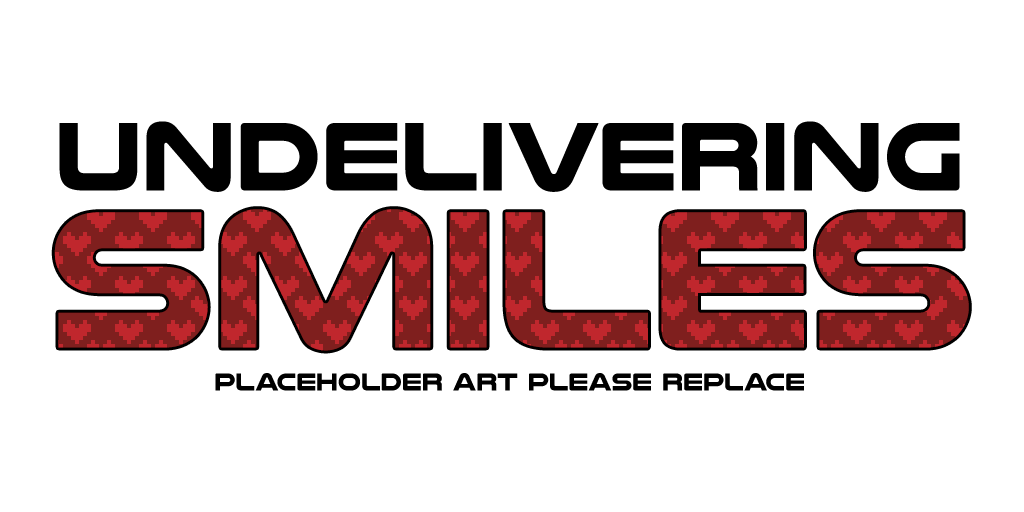
<style>
.page{position:relative;width:1024px;height:512px;background:#ffffff}
.page>*{position:absolute;margin:0}
.t1{font:100px "NulshockRg-Bold";color:#000000}
.t2{font:200px "NulshockRg-Bold"}
.t3{font:25px "NulshockRg-Bold";color:#000000}
</style>
<div class="page">
<p class="t1" style="left:59px;top:121px;width:901px;height:71px">Undelivering</p>
<p class="t2" style="left:54px;top:209px;width:915px;height:142px">SMILES</p>
<p class="t3" style="left:215px;top:373px;width:589px;height:18px">PLACEHOLDER ART PLEASE REPLACE</p>
</div>
